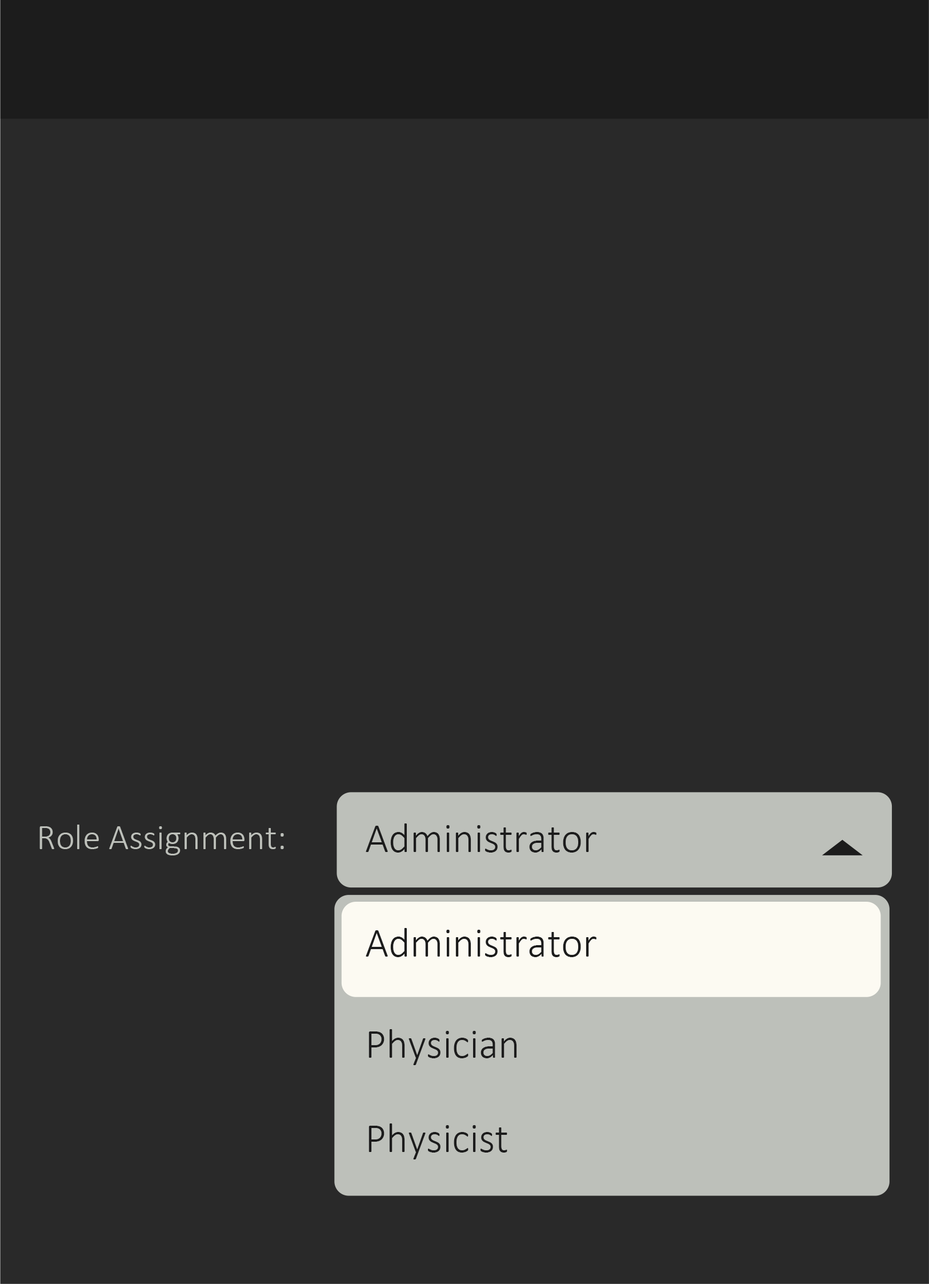
<style>
.page{position:relative;width:929px;height:1284px;background:#292929}
.page>*{position:absolute;margin:0}
.t1{font:35.7px "Calibri-Light";letter-spacing:0.004em;color:#bdc0ba}
.t2{font:41.7px "Calibri-Light";color:#1c1c1c}
</style>
<div class="page">
<p class="t1" style="left:39px;top:824px;width:245px;height:31px">Role Assignment:</p>
<p class="t2" style="left:366px;top:823px;width:230px;height:29px">Administrator</p>
<p class="t2" style="left:366px;top:928px;width:230px;height:29px">Administrator</p>
<p class="t2" style="left:368px;top:1029px;width:149px;height:36px">Physician</p>
<p class="t2" style="left:368px;top:1123px;width:139px;height:36px">Physicist</p>
</div>
